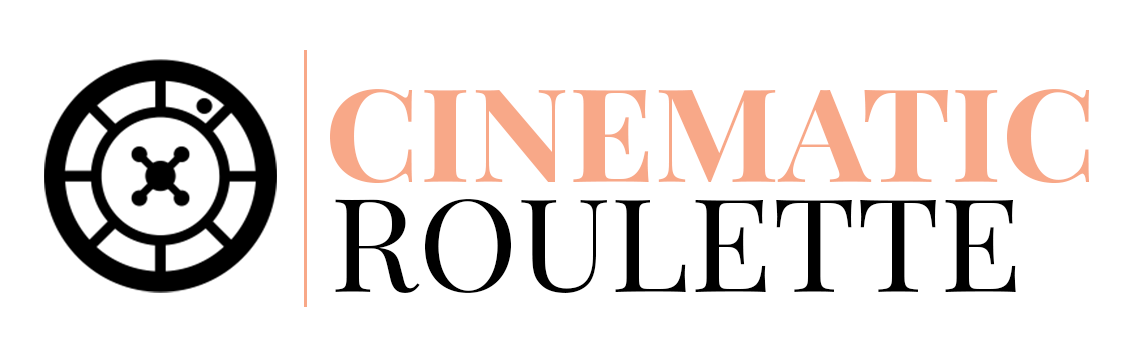
<style>
.page{position:relative;width:1126px;height:355px;background:#ffffff}
.page>*{position:absolute;margin:0}
.t1{font:130px "PlayfairDisplaySC-Bold";color:#f8a888;scale:1.04 1}
.t2{font:130px "PlayfairDisplay-Regular";color:#000000;scale:1.04 1}
</style>
<div class="page">
<p class="t1" style="left:330px;top:89px;width:760px;height:94px">CINEMATIC</p>
<p class="t2" style="left:335px;top:199px;width:681px;height:94px">ROULETTE</p>
</div>
